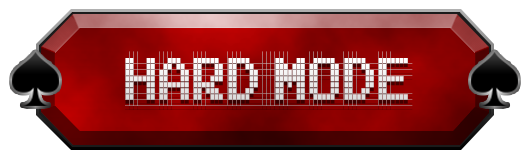
<style>
.page{position:relative;width:528px;height:160px;background:#ffffff}
.page>*{position:absolute;margin:0}
.t1{font:77.9px "Famirids";color:#ffffff;scale:0.71 1}
</style>
<div class="page">
<p class="t1" style="left:125px;top:51px;width:288px;height:55px">hard mode</p>
</div>
